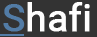
<style>
.page{position:relative;width:97px;height:37px;background:#333333}
.page>*{position:absolute;margin:0}
.t1{font:37.7px "Roboto-Regular";color:#fefefe;font-weight:bold}
.t2{font:37.7px "Roboto-Regular";color:#527ca6;font-weight:bold}
</style>
<div class="page">
<p class="t1" style="left:3px;top:2px;width:87px;height:30px"><span class="t2">S</span>hafi</p>
</div>
